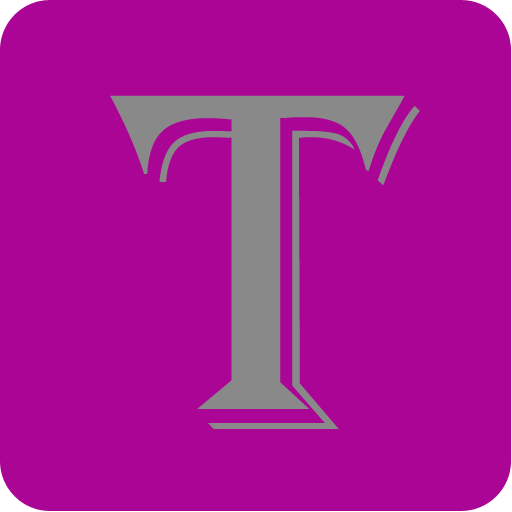
<style>
.page{position:relative;width:512px;height:512px;background:#ab0596}
.page>*{position:absolute;margin:0}
.t1{font:500px "Algerian";color:#898989}
</style>
<div class="page">
<p class="t1" style="left:110px;top:95px;width:310px;height:334px">T</p>
</div>
